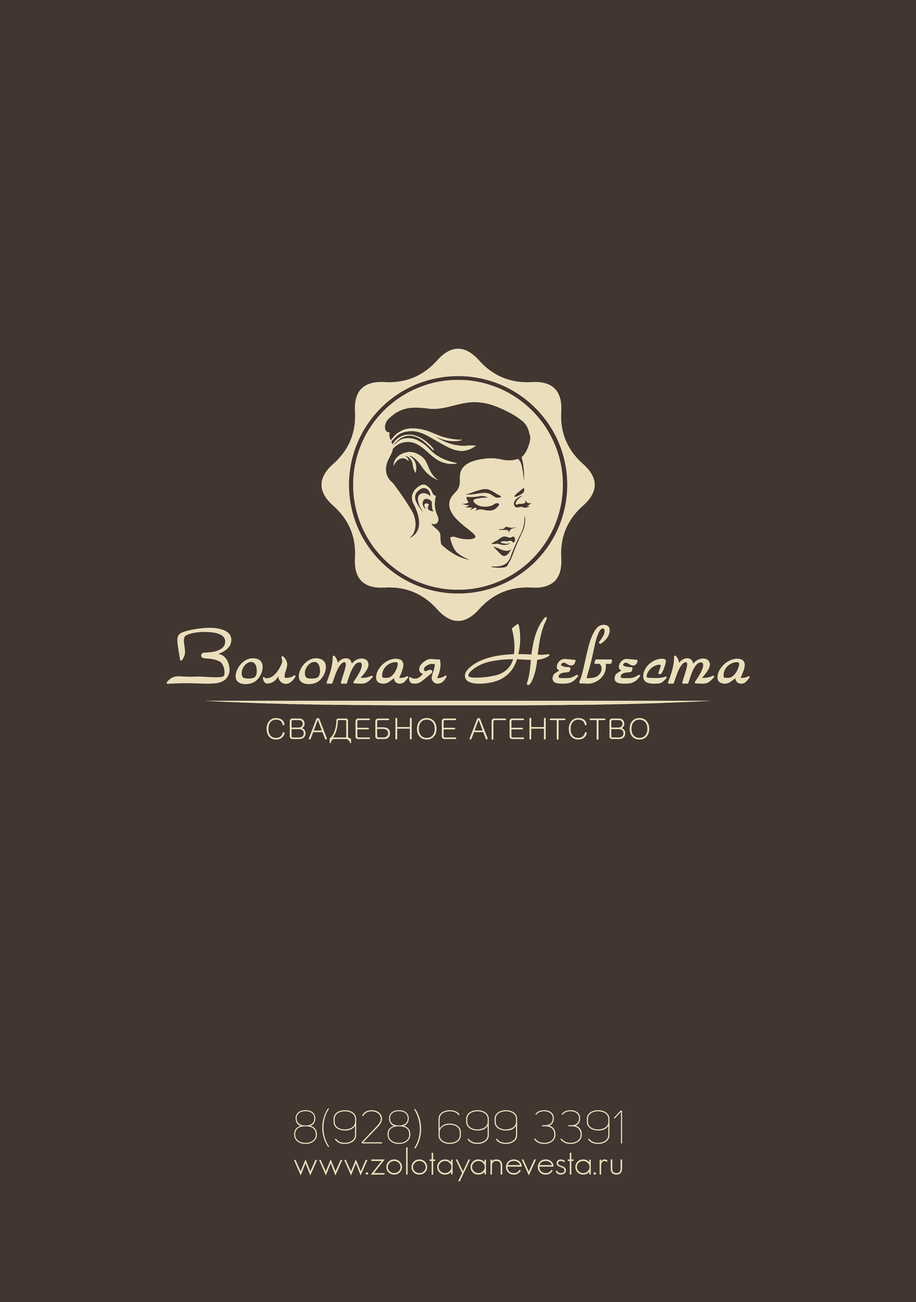
<style>
.page{position:relative;width:916px;height:1302px;background:#413630}
.page>*{position:absolute;margin:0}
.t1{font:80.8px "ParkAvenueNormal";color:#ebdebc}
.t2{font:30px "Gulim";color:#ebdebc}
.t3{font:46.1px "UniSansThinCAPS";color:#ebdebc}
</style>
<div class="page">
<p class="t1" style="left:168px;top:617px;width:581px;height:67px">Золотая Невеcта</p>
<p class="t2" style="left:266px;top:718px;width:383px;height:25px">СВАДЕБНОЕ АГЕНТСТВО</p>
<p class="t3" style="left:294px;top:1108px;width:328px;height:40px">8(928) 699 3391</p>
</div>
